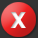
<style>
.page{position:relative;width:38px;height:38px}
.page>*{position:absolute;margin:0}
.t1{font:22px "Tahoma-Bold";color:#ffffff}
</style>
<div class="page">
<p class="t1" style="left:10px;top:12px;width:16px;height:16px">X</p>
</div>
